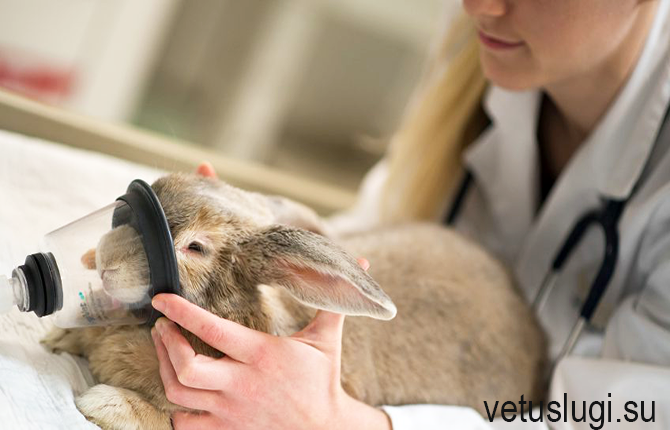
<style>
.page{position:relative;width:670px;height:430px}
.page>*{position:absolute;margin:0}
.t1{font:40px "ArialNarrow";letter-spacing:0.002em;color:#121314}
</style>
<div class="page">
<p class="t1" style="left:483px;top:393px;width:172px;height:37px">vetuslugi.su</p>
</div>
